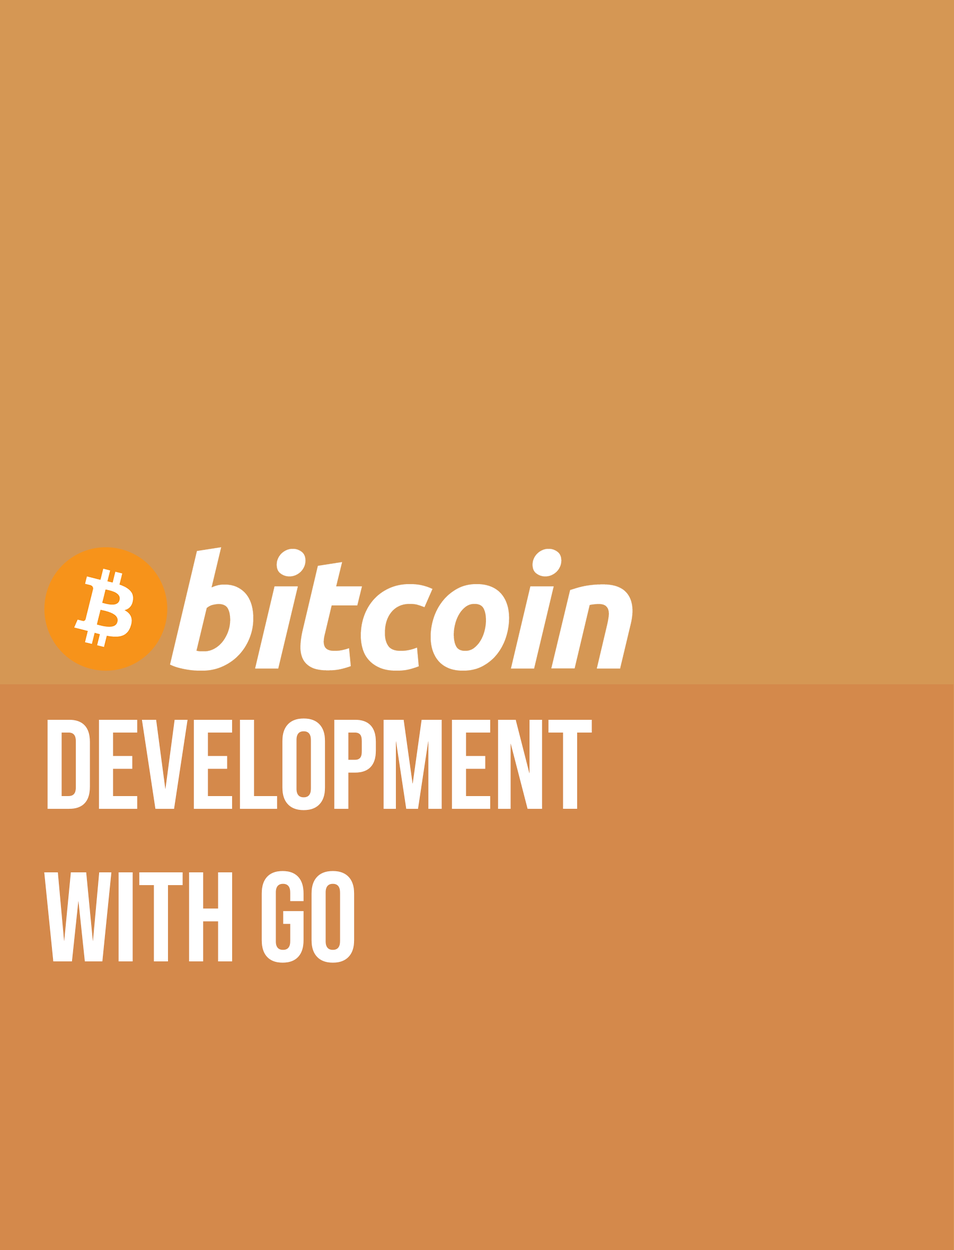
<style>
.page{position:relative;width:954px;height:1250px;background:#d59754}
.page>*{position:absolute;margin:0}
.t1{font:127.2px "BebasNeue-Regular";color:#ffffff}
</style>
<div class="page">
<p class="t1" style="left:44px;top:718px;width:548px;height:245px">Development<br>with Go</p>
</div>
